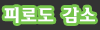
<style>
.page{position:relative;width:100px;height:30px;background:#333333}
.page>*{position:absolute;margin:0}
.t1{font:17px "HaanSomangB";color:#ffffff}
</style>
<div class="page">
<p class="t1" style="left:4px;top:7px;width:91px;height:16px">피로도 감소</p>
</div>
